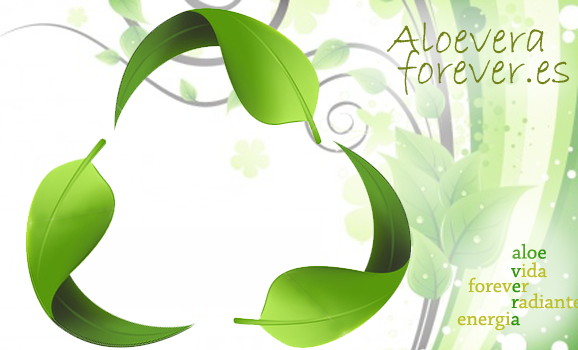
<style>
.page{position:relative;width:578px;height:350px;background:#ffffff}
.page>*{position:absolute;margin:0}
.t1{font:45.8px "BradleyHandITC";color:#728219}
.t2{font:20.8px "ChaparralPro-Regular"}
.t3{font:20.8px "ChaparralPro-Regular";color:#bdbf27}
.t4{font:20.8px "ChaparralPro-Regular";color:#309509}
</style>
<div class="page">
<p class="t1" style="left:387px;top:22px;width:157px;height:32px">Aloevera</p>
<p class="t1" style="left:397px;top:50px;width:173px;height:46px">forever.es</p>
<p class="t2" style="left:512px;top:243px;width:34px;height:16px">aloe</p>
<p class="t3" style="left:511px;top:262px;width:36px;height:16px"><span class="t4">v</span>ida</p>
<p class="t3" style="left:468px;top:277px;width:61px;height:16px">forev<span class="t4">e</span>r</p>
<p class="t3" style="left:457px;top:311px;width:63px;height:20px">energi<span class="t4">a</span></p>
</div>
